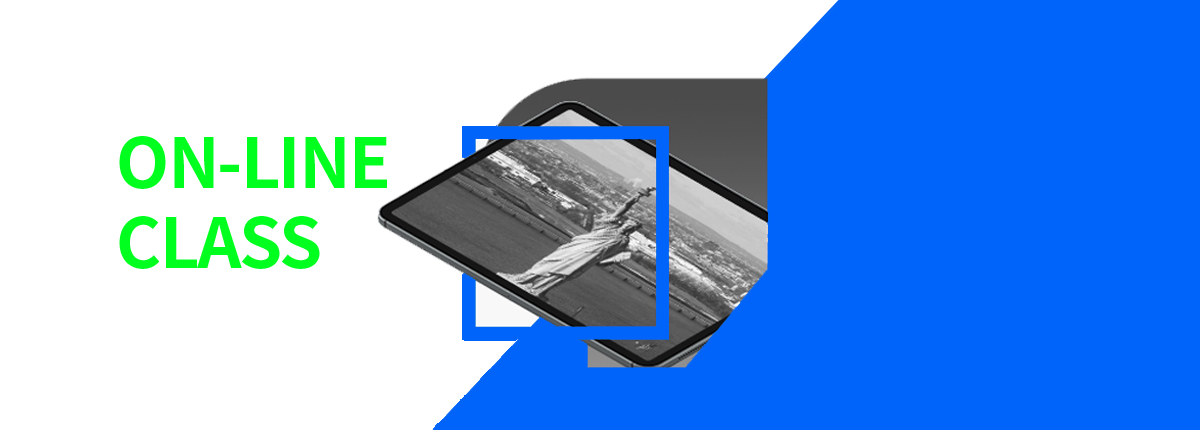
<style>
.page{position:relative;width:1200px;height:430px;background:#0064fb}
.page>*{position:absolute;margin:0}
.t1{font:69px/79.7px "NotoSansKR-Bold";letter-spacing:-0.03em;color:#00ff1f}
</style>
<div class="page">
<p class="t1" style="left:119px;top:136px;width:268px;height:133px">ON-LINE<br>CLASS</p>
</div>
